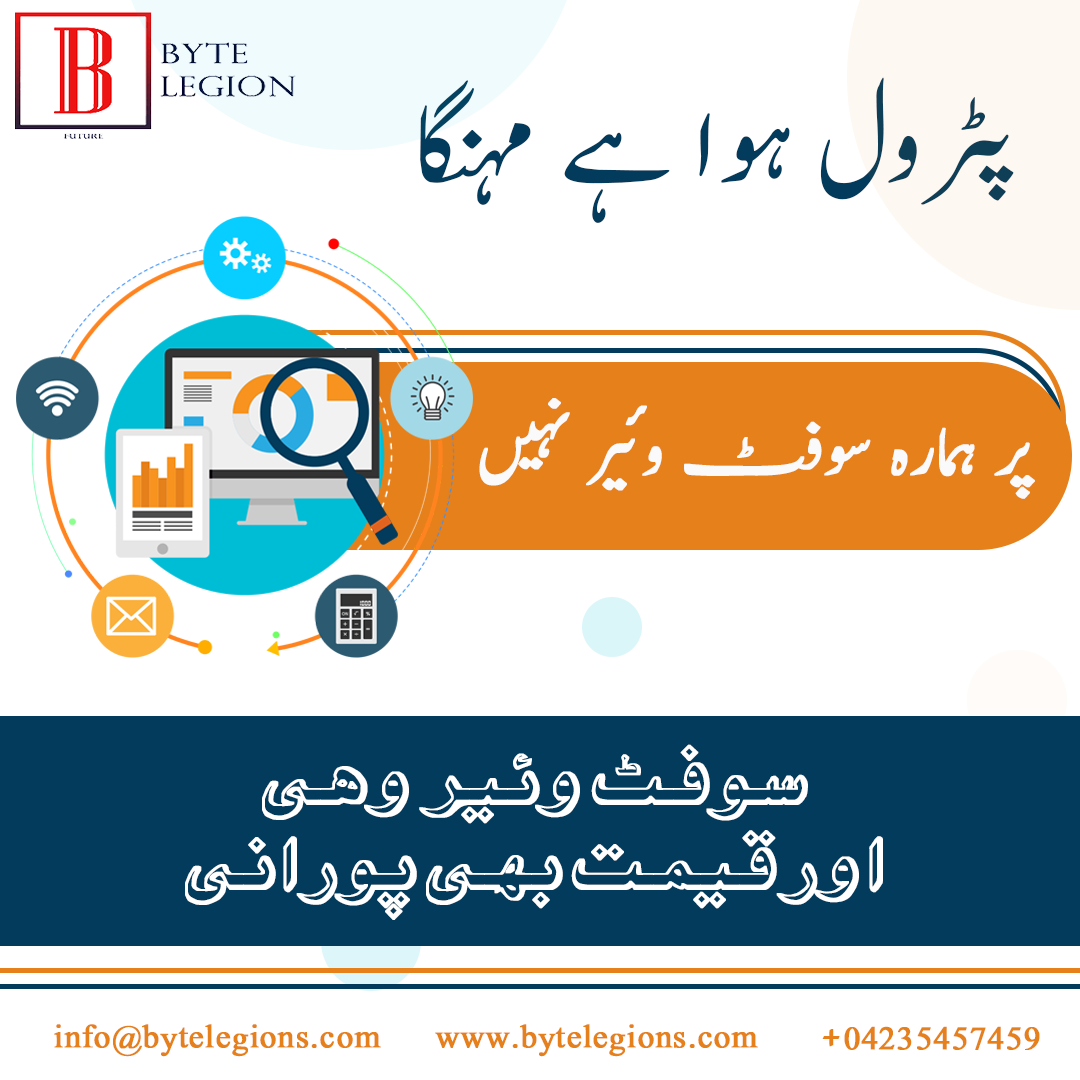
<style>
.page{position:relative;width:1080px;height:1080px;background:#ffffff}
.page>*{position:absolute;margin:0}
.t1{font:129.2px "Jameel-Noori-Nastaleeq";color:#023b5b;text-transform:uppercase}
.t2{font:78.9px "Jameel-Noori-Nastaleeq-Kasheeda";color:#fafafa;text-transform:uppercase;font-weight:bold}
.t3{font:68px/85.1px "Sadaf-Unicode";color:#ffffff;text-transform:uppercase;font-weight:bold}
.t4{font:40px "Jameel-Noori-Nastaleeq-Kasheeda";color:#e5801a;font-weight:bold}
</style>
<div class="page">
<p class="t1" style="left:420px;top:77px;width:594px;height:146px">پٹرول ہوا ہے مہنگا</p>
<p class="t2" style="left:479px;top:398px;width:556px;height:101px">پر ہمارہ سوفٹ وئیر نہیں</p>
<p class="t3" style="left:185px;top:744px;width:698px;height:176px;text-align:center">سوفٹ وئیر وہی<br>اور قیمت بھی پورانی</p>
<p class="t4" style="left:54px;top:1024px;width:327px;height:33px">info@bytelegions.com</p>
<p class="t4" style="left:435px;top:1024px;width:323px;height:33px">www.bytelegions.com</p>
<p class="t4" style="left:822px;top:1026px;width:218px;height:24px">+04235457459</p>
</div>
